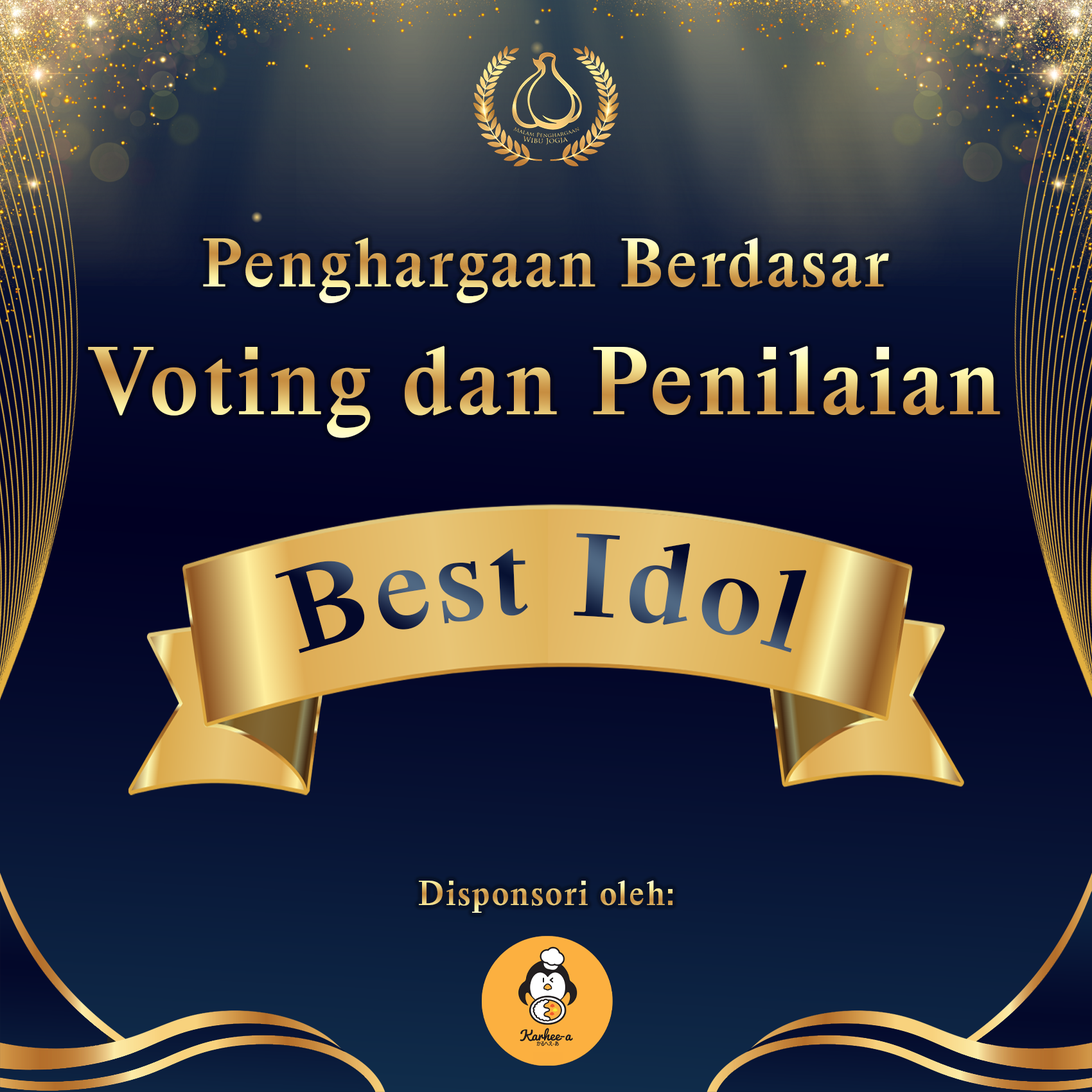
<style>
.page{position:relative;width:1092px;height:1092px}
.page>*{position:absolute;margin:0}
.t1{font:64.1px "HappyTimesattheIKOBNewGamePlusEdition-Bold";letter-spacing:0.04em}
.t2{font:90px "HappyTimesattheIKOBNewGamePlusEdition-Bold";letter-spacing:0.04em}
.t3{font:109.6px "HappyTimesattheIKOBNewGamePlusEdition-Bold";letter-spacing:0.04em}
.t4{font:31.9px "HappyTimesattheIKOBNewGamePlusEdition-Bold";letter-spacing:0.04em}
</style>
<div class="page">
<p class="t1" style="left:203px;top:238px;width:686px;height:65px">Penghargaan Berdasar</p>
<p class="t2" style="left:88px;top:346px;width:912px;height:92px">Voting dan Penilaian</p>
<p class="t3" style="left:275px;top:533px;width:532px;height:120px">Best Idol</p>
<p class="t4" style="left:419px;top:880px;width:254px;height:33px">Disponsori oleh:</p>
</div>
